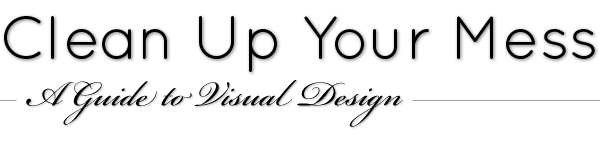
<style>
.page{position:relative;width:600px;height:150px;background:#ffffff}
.page>*{position:absolute;margin:0}
.t1{font:61px "QuicksandBook-Regular";color:#000000}
.t2{font:54px "BickhamScriptPro-Regular";color:#000000}
</style>
<div class="page">
<p class="t1" style="left:4px;top:16px;width:591px;height:56px">Clean Up Your Mess</p>
<p class="t2" style="left:26px;top:80px;width:377px;height:47px">A Guide to Visual Design</p>
</div>
